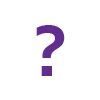
<style>
.page{position:relative;width:100px;height:100px;background:#ffffff}
.page>*{position:absolute;margin:0}
.t1{font:77.3px "Corbel-Bold";color:#622d91}
</style>
<div class="page">
<p class="t1" style="left:36px;top:25px;width:29px;height:51px">?</p>
</div>
